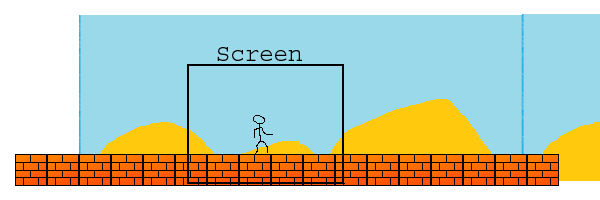
<style>
.page{position:relative;width:600px;height:200px;background:#99d9ea}
.page>*{position:absolute;margin:0}
.t1{font:24px "Courier";color:#000000}
</style>
<div class="page">
<p class="t1" style="left:216px;top:43px;width:86px;height:25px">Screen</p>
</div>
